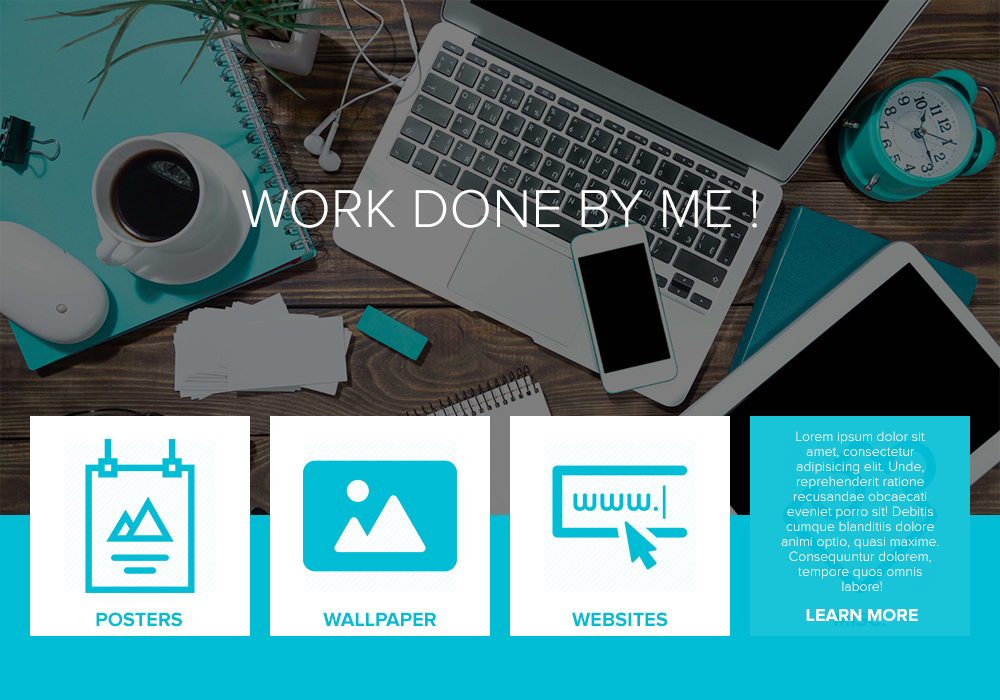
<style>
.page{position:relative;width:1000px;height:700px}
.page>*{position:absolute;margin:0}
.t1{font:55.2px "ProximaNova-Light";color:#ffffff}
.t2{font:14px/15px "ProximaNova-Light";color:#ffffff}
.t3{font:18px/15px "ProximaNova-Bold";color:#ffffff}
.t4{font:20px "ProximaNova-Bold";color:#00bcd4}
</style>
<div class="page">
<p class="t1" style="left:242px;top:189px;width:515px;height:39px">WORK DONE BY ME !</p>
<p class="t2" style="left:781px;top:431px;width:158px;height:190px;text-align:center">Lorem ipsum dolor sit <br>amet, consectetur <br>adipisicing elit. Unde, <br>reprehenderit ratione <br>recusandae obcaecati <br>eveniet porro sit! Debitis <br>cumque blanditiis dolore <br>animi optio, quasi maxime. <br>Consequuntur dolorem, <br>tempore quos omnis <br>labore!<br><br><span class="t3">LEARN MORE</span></p>
<p class="t4" style="left:96px;top:612px;width:86px;height:15px">POSTERS</p>
<p class="t4" style="left:323px;top:612px;width:113px;height:14px">WALLPAPER</p>
<p class="t4" style="left:572px;top:612px;width:96px;height:15px">WEBSITES</p>
</div>
